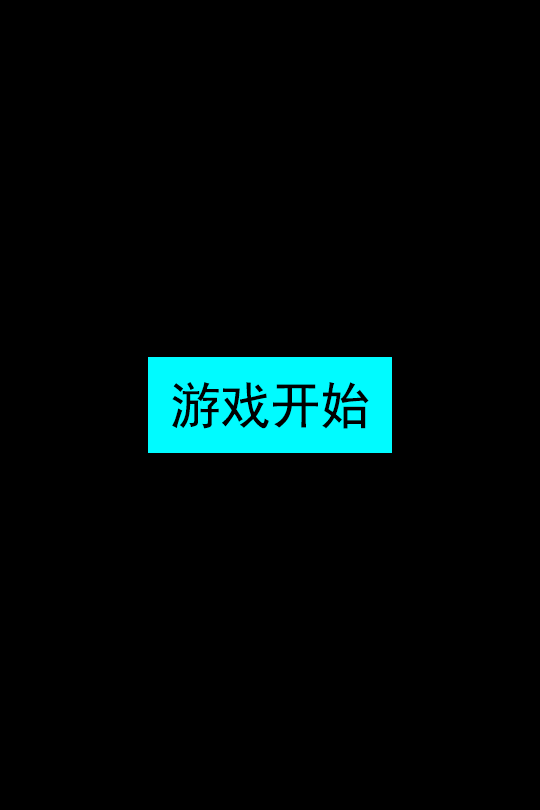
<style>
.page{position:relative;width:540px;height:810px;background:#000000}
.page>*{position:absolute;margin:0}
.t1{font:50px "SimHei";color:#000000}
</style>
<div class="page">
<p class="t1" style="left:172px;top:382px;width:197px;height:47px">游戏开始</p>
</div>
